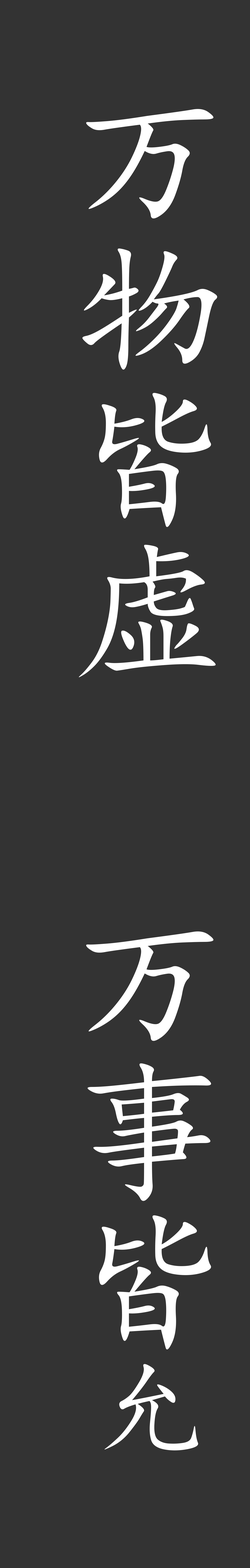
<style>
.page{position:relative;width:250px;height:1568px;background:#333333}
.page>*{position:absolute;margin:0}
.t1{font:149.5px "KaiTi";color:#ffffff;scale:1.04 1}
.t2{font:106.8px "KaiTi";color:#ffffff;scale:1.04 1}
</style>
<div class="page">
<p class="t1" style="left:79px;top:109px;width:138px;height:1342px">万物皆虚   万事皆<span class="t2">允</span></p>
</div>
